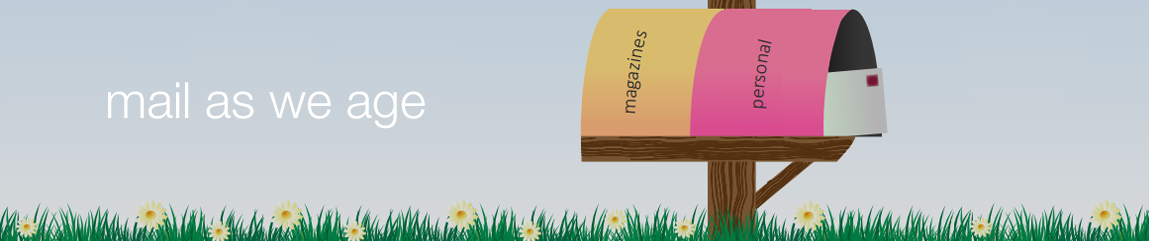
<style>
.page{position:relative;width:1149px;height:241px}
.page>*{position:absolute;margin:0}
.t1{font:50px "HelveticaNeueLTPro-Lt";color:#ffffff}
</style>
<div class="page">
<p class="t1" style="left:108px;top:82px;width:317px;height:47px">mail as we age</p>
</div>
